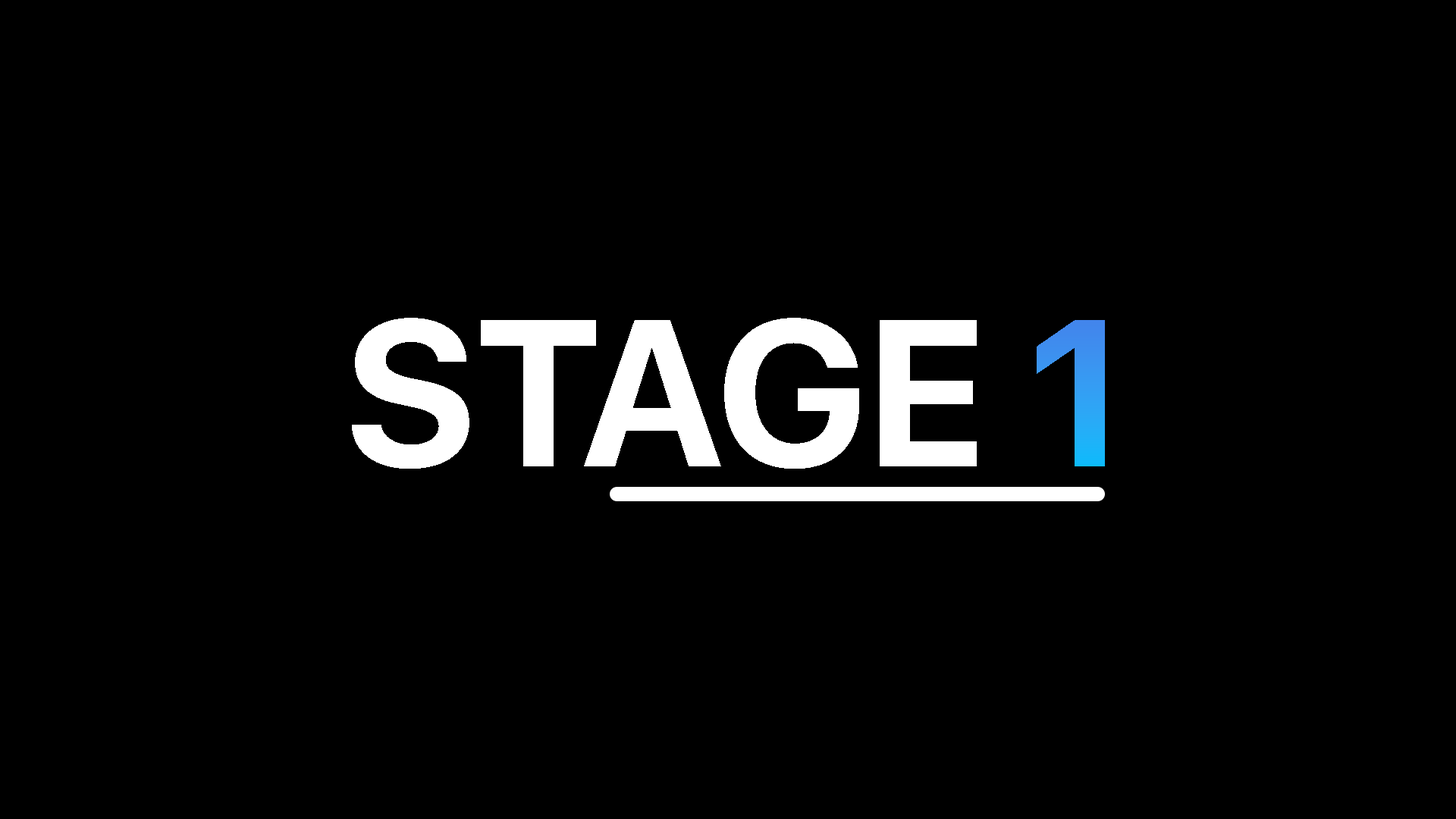
<style>
.page{position:relative;width:1456px;height:819px;background:#000000}
.page>*{position:absolute;margin:0}
.t1{font:207.2px "SFProDisplay-Bold";color:#ffffff;text-transform:uppercase}
.t2{font:207.2px "SFProDisplay-Bold";color:#9d4d30;text-transform:uppercase}
</style>
<div class="page">
<p class="t1" style="left:352px;top:318px;width:753px;height:151px">Stage<span class="t2"> 1</span></p>
</div>
